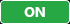
<style>
.page{position:relative;width:70px;height:24px;background:#28a745}
.page>*{position:absolute;margin:0}
.t1{font:14px "SegoeUI-Bold";color:#ffffff}
</style>
<div class="page">
<p class="t1" style="left:24px;top:7px;width:21px;height:10px">ON</p>
</div>
